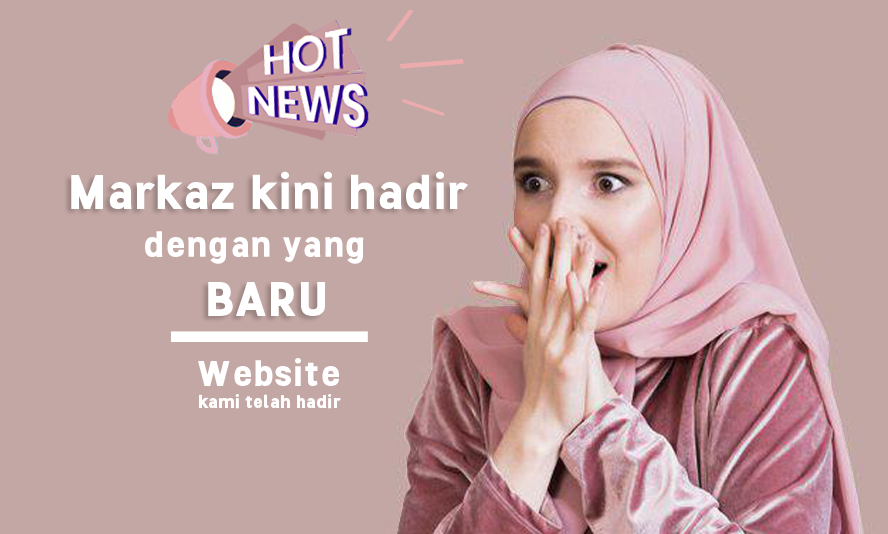
<style>
.page{position:relative;width:888px;height:534px;background:#c3a7a4}
.page>*{position:absolute;margin:0}
.t1{font:48px "Stellar-Bold";color:#ffffff;scale:1.17 1}
.t2{font:36px "Stellar-Bold";color:#ffffff;scale:1.17 1}
.t3{font:18px "Stellar-Bold";color:#ffffff;scale:1.17 1}
</style>
<div class="page">
<p class="t1" style="left:71px;top:171px;width:397px;height:38px">Markaz kini hadir</p>
<p class="t2" style="left:145px;top:231px;width:219px;height:33px">dengan yang</p>
<p class="t1" style="left:208px;top:282px;width:117px;height:34px">BARU</p>
<p class="t3" style="left:198px;top:358px;width:143px;height:51px"><span class="t2">Website</span> <br>kami telah hadir</p>
</div>
